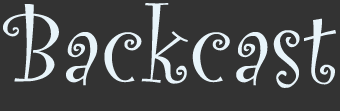
<style>
.page{position:relative;width:340px;height:111px;background:#333333}
.page>*{position:absolute;margin:0}
.t1{font:106.7px "CurlzMT";color:#e8f4fa}
</style>
<div class="page">
<p class="t1" style="left:3px;top:3px;width:333px;height:85px">Backcast</p>
</div>
